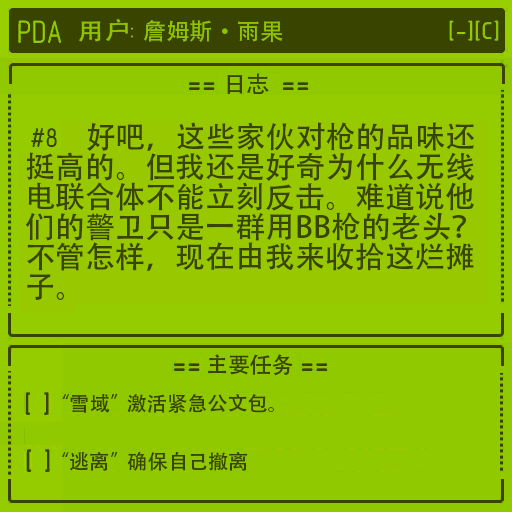
<style>
.page{position:relative;width:512px;height:512px;background:#90c900}
.page>*{position:absolute;margin:0}
.t1{font:30px/30px "AdobeHeitiStd-Regular";color:#384400}
</style>
<div class="page">
<p class="t1" style="left:25px;top:122px;width:449px;height:178px">好吧，这些家伙对枪的品味还<br>挺高的。但我还是好奇为什么无线<br>电联合体不能立刻反击。难道说他<br>们的警卫只是一群用BB枪的老头？<br>不管怎样，现在由我来收拾这烂摊<br>子。</p>
</div>
